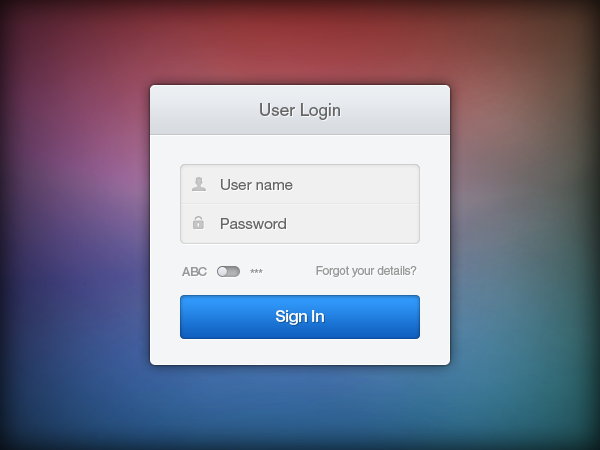
<style>
.page{position:relative;width:600px;height:450px}
.page>*{position:absolute;margin:0}
.t1{font:17px "HelveticaLTStd-Roman";color:#666666}
.t2{font:15px/39px "HelveticaNeueLTStd-Roman";color:#666666}
.t3{font:12px "HelveticaNeueLTStd-Md";letter-spacing:-0.02em;color:#999999;text-transform:uppercase}
.t4{font:12px "HelveticaLTStd-Roman";letter-spacing:-0.02em;color:#999999}
.t5{font:16px "HelveticaNeueLTStd-Md";letter-spacing:-0.02em;color:#ffffff}
</style>
<div class="page">
<p class="t1" style="left:260px;top:103px;width:80px;height:17px">User Login</p>
<p class="t2" style="left:221px;top:179px;width:72px;height:50px">User name<br>Password</p>
<p class="t3" style="left:182px;top:267px;width:25px;height:9px">ABC</p>
<p class="t3" style="left:250px;top:269px;width:13px;height:4px">***</p>
<p class="t4" style="left:316px;top:266px;width:101px;height:12px">Forgot your details?</p>
<p class="t5" style="left:276px;top:310px;width:48px;height:15px">Sign In</p>
</div>
